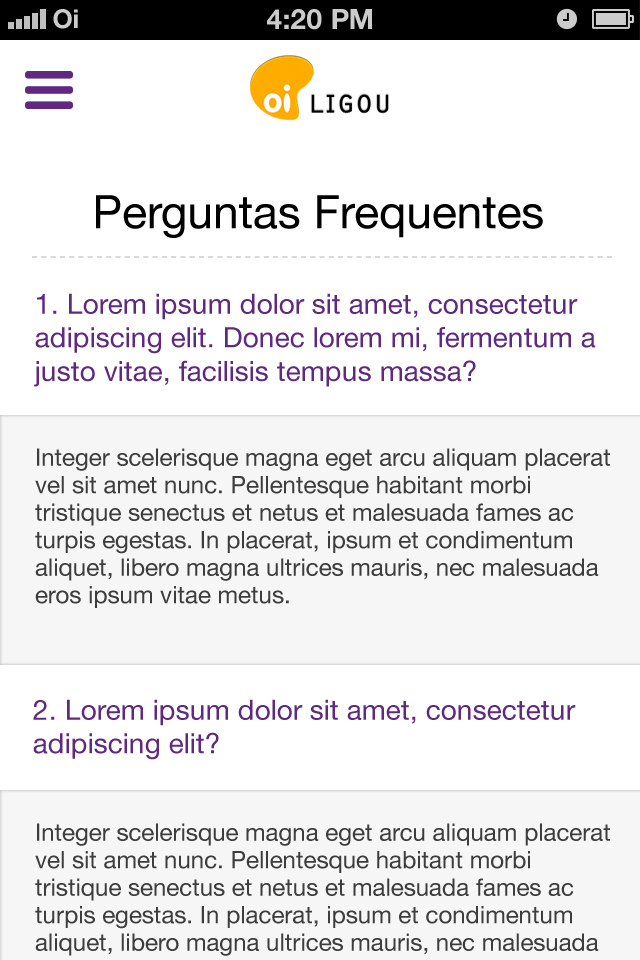
<style>
.page{position:relative;width:640px;height:960px;background:#ffffff}
.page>*{position:absolute;margin:0}
.t1{font:26px "HelveticaNeue-Bold";color:#cccccc}
.t2{font:28px "HelveticaNeue-Bold";color:#cccccc;text-transform:uppercase}
.t3{font:46px "HelveticaNeue-Roman";color:#000000}
.t4{font:28px "HelveticaNeue";color:#5f2981}
.t5{font:24px/27.5px "HelveticaNeue-Roman";color:#3d3d3d}
</style>
<div class="page">
<p class="t1" style="left:53px;top:9px;width:25px;height:20px">Oi</p>
<p class="t2" style="left:267px;top:9px;width:105px;height:21px">4:20 pM</p>
<p class="t3" style="left:96px;top:195px;width:447px;height:43px">Perguntas Frequentes</p>
<p class="t4" style="left:34px;top:293px;width:562px;height:94px">1. Lorem ipsum dolor sit amet, consectetur adipiscing elit. Donec lorem mi, fermentum a justo vitae, facilisis tempus massa?</p>
<p class="t5" style="left:35px;top:448px;width:575px;height:160px">Integer scelerisque magna eget arcu aliquam placerat vel sit amet nunc. Pellentesque habitant morbi tristique senectus et netus et malesuada fames ac turpis egestas. In placerat, ipsum et condimentum aliquet, libero magna ultrices mauris, nec malesuada eros ipsum vitae metus.</p>
<p class="t4" style="left:33px;top:699px;width:543px;height:61px">2. Lorem ipsum dolor sit amet, consectetur adipiscing elit?</p>
</div>
